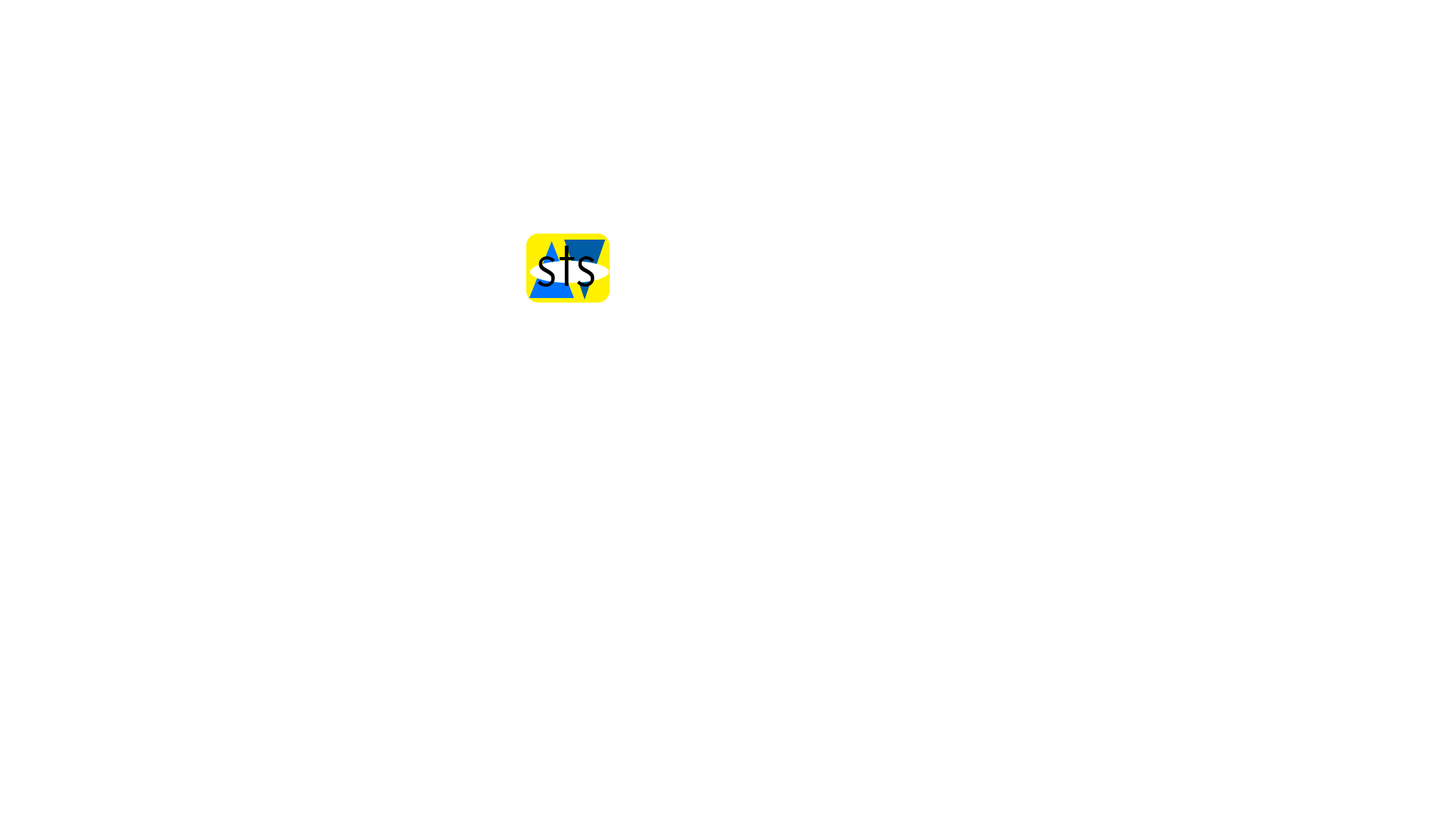
<style>
.page{position:relative;width:1456px;height:819px;background:#ffffff}
.page>*{position:absolute;margin:0}
.t1{font:54.6px "STXihei";color:#000000}
</style>
<div class="page">
<p class="t1" style="left:537px;top:246px;width:58px;height:41px">stsseet</p>
</div>
